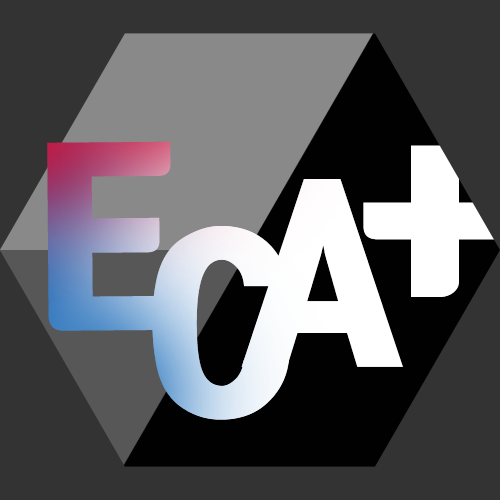
<style>
.page{position:relative;width:500px;height:500px;background:#333333}
.page>*{position:absolute;margin:0}
.t1{font:217.1px "TmonMonsoriBlack"}
.t2{font:217.1px "TmonMonsoriBlack";color:#ffffff}
</style>
<div class="page">
<p class="t1" style="left:47px;top:141px;width:125px;height:190px">E</p>
<p class="t2" style="left:241px;top:179px;width:162px;height:188px">A</p>
<p class="t1" style="left:152px;top:226px;width:137px;height:194px">C</p>
</div>
